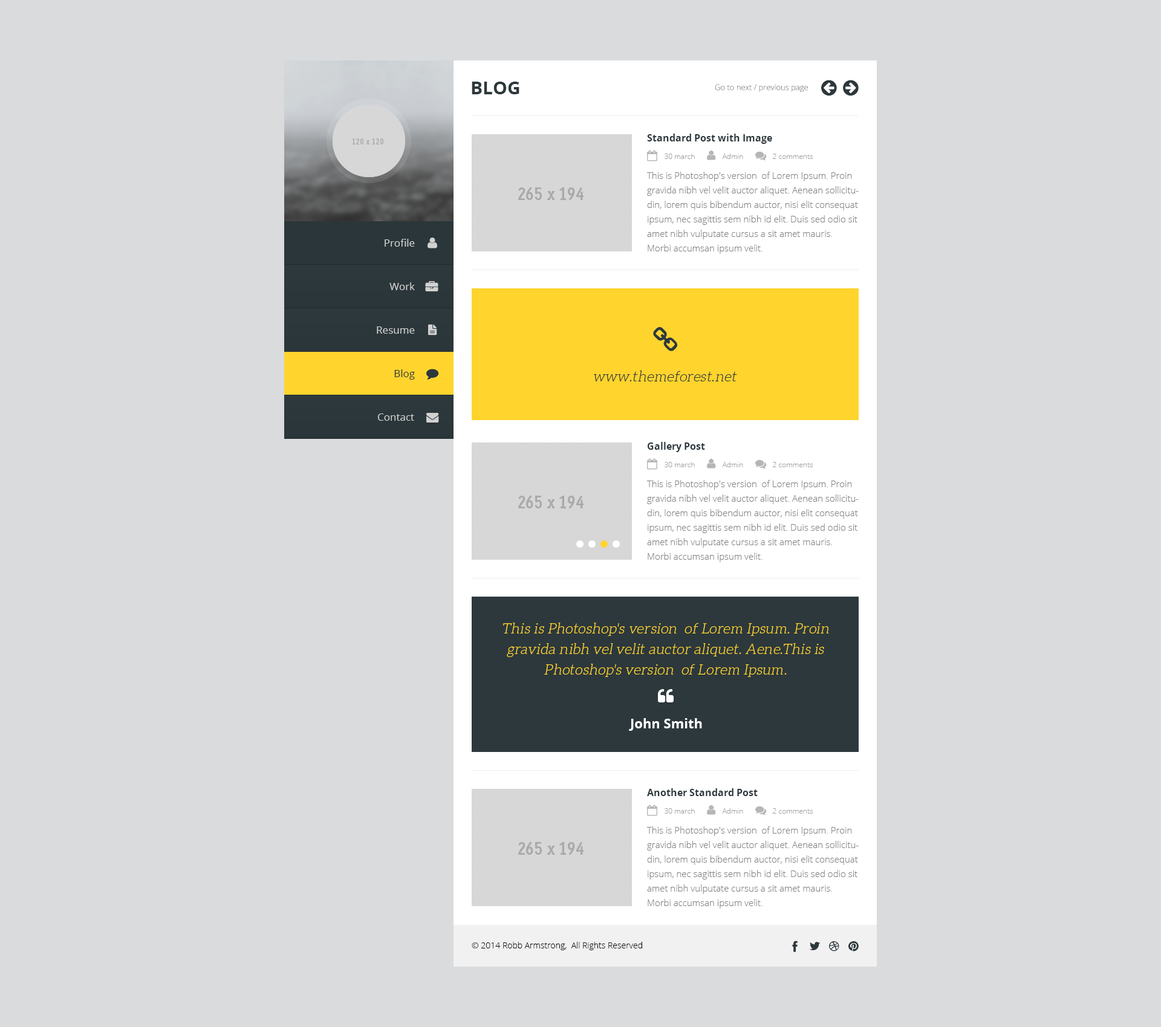
<style>
.page{position:relative;width:1161px;height:1027px;background:#d9dbdd}
.page>*{position:absolute;margin:0}
.t1{font:18.1px "OpenSans-Bold";color:#2c383c;text-transform:uppercase}
.t2{font:7.9px "OpenSans-Light"}
.t3{font:9.7px "OpenSans-Bold";color:#2c383c}
.t4{font:7.2px "OpenSans-Light";color:#a1a1a1}
.t5{font:9.1px/14.5px "OpenSans-Light";color:#828282}
.t6{font:10.3px "OpenSans";color:#d1d1d1}
.t7{font:10.3px "OpenSans";color:#2c383c}
.t8{font:14.5px "Aleo-Light";color:#2c383c;font-style:italic}
.t9{font:14.5px/20.6px "Aleo-Light";color:#ffd42d;font-style:italic}
.t10{font:13.3px "OpenSans-Bold";color:#ffffff}
.t11{font:8.5px "OpenSans-Light";color:#000000}
</style>
<div class="page">
<p class="t1" style="left:472px;top:82px;width:47px;height:12px">Blog</p>
<p class="t2" style="left:715px;top:84px;width:93px;height:8px">Go to next / previous page</p>
<p class="t3" style="left:647px;top:134px;width:125px;height:10px">Standard Post with Image</p>
<p class="t4" style="left:664px;top:154px;width:31px;height:5px">30 march</p>
<p class="t4" style="left:722px;top:154px;width:21px;height:5px">Admin</p>
<p class="t4" style="left:773px;top:154px;width:40px;height:5px">2 comments</p>
<p class="t5" style="left:646px;top:172px;width:213px;height:82px">This is Photoshop's version  of Lorem Ipsum. Proin gravida nibh vel velit auctor aliquet. Aenean sollicitudin, lorem quis bibendum auctor, nisi elit consequat ipsum, nec sagittis sem nibh id elit. Duis sed odio sit amet nibh vulputate cursus a sit amet mauris. Morbi accumsan ipsum velit.</p>
<p class="t6" style="left:385px;top:239px;width:30px;height:8px">Profile</p>
<p class="t6" style="left:389px;top:282px;width:26px;height:8px">Work</p>
<p class="t6" style="left:377px;top:326px;width:38px;height:8px">Resume</p>
<p class="t7" style="left:394px;top:369px;width:21px;height:11px">Blog</p>
<p class="t8" style="left:594px;top:371px;width:143px;height:11px">www.themeforest.net</p>
<p class="t6" style="left:377px;top:414px;width:37px;height:7px">Contact</p>
<p class="t3" style="left:648px;top:442px;width:57px;height:10px">Gallery Post</p>
<p class="t4" style="left:664px;top:462px;width:31px;height:5px">30 march</p>
<p class="t4" style="left:722px;top:462px;width:21px;height:5px">Admin</p>
<p class="t4" style="left:773px;top:462px;width:40px;height:5px">2 comments</p>
<p class="t5" style="left:646px;top:480px;width:213px;height:82px">This is Photoshop's version  of Lorem Ipsum. Proin gravida nibh vel velit auctor aliquet. Aenean sollicitudin, lorem quis bibendum auctor, nisi elit consequat ipsum, nec sagittis sem nibh id elit. Duis sed odio sit amet nibh vulputate cursus a sit amet mauris. Morbi accumsan ipsum velit.</p>
<p class="t9" style="left:503px;top:623px;width:326px;height:54px;text-align:center">This is Photoshop's version  of Lorem Ipsum. Proin gravida nibh vel velit auctor aliquet. Aene.This is Photoshop's version  of Lorem Ipsum.</p>
<p class="t10" style="left:629px;top:718px;width:73px;height:13px">John Smith</p>
<p class="t3" style="left:647px;top:788px;width:111px;height:8px">Another Standard Post</p>
<p class="t4" style="left:664px;top:808px;width:31px;height:6px">30 march</p>
<p class="t4" style="left:722px;top:808px;width:21px;height:6px">Admin</p>
<p class="t4" style="left:773px;top:808px;width:40px;height:6px">2 comments</p>
<p class="t5" style="left:646px;top:826px;width:213px;height:83px">This is Photoshop's version  of Lorem Ipsum. Proin gravida nibh vel velit auctor aliquet. Aenean sollicitudin, lorem quis bibendum auctor, nisi elit consequat ipsum, nec sagittis sem nibh id elit. Duis sed odio sit amet nibh vulputate cursus a sit amet mauris. Morbi accumsan ipsum velit.</p>
<p class="t11" style="left:472px;top:942px;width:170px;height:8px">© 2014 Robb Armstrong,  All Rights Reserved</p>
</div>
